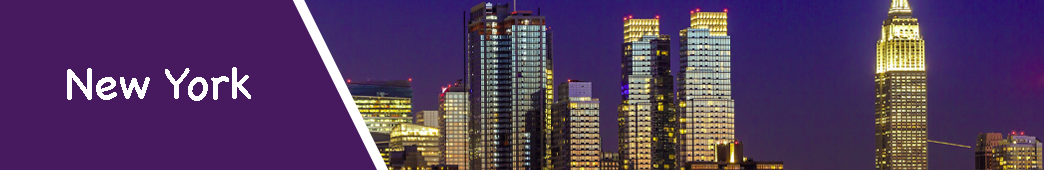
<style>
.page{position:relative;width:1044px;height:170px;background:#47195e}
.page>*{position:absolute;margin:0}
.t1{font:45px "ChalkboardSE-Regular";color:#fefefe}
</style>
<div class="page">
<p class="t1" style="left:67px;top:67px;width:184px;height:34px">New York</p>
</div>
